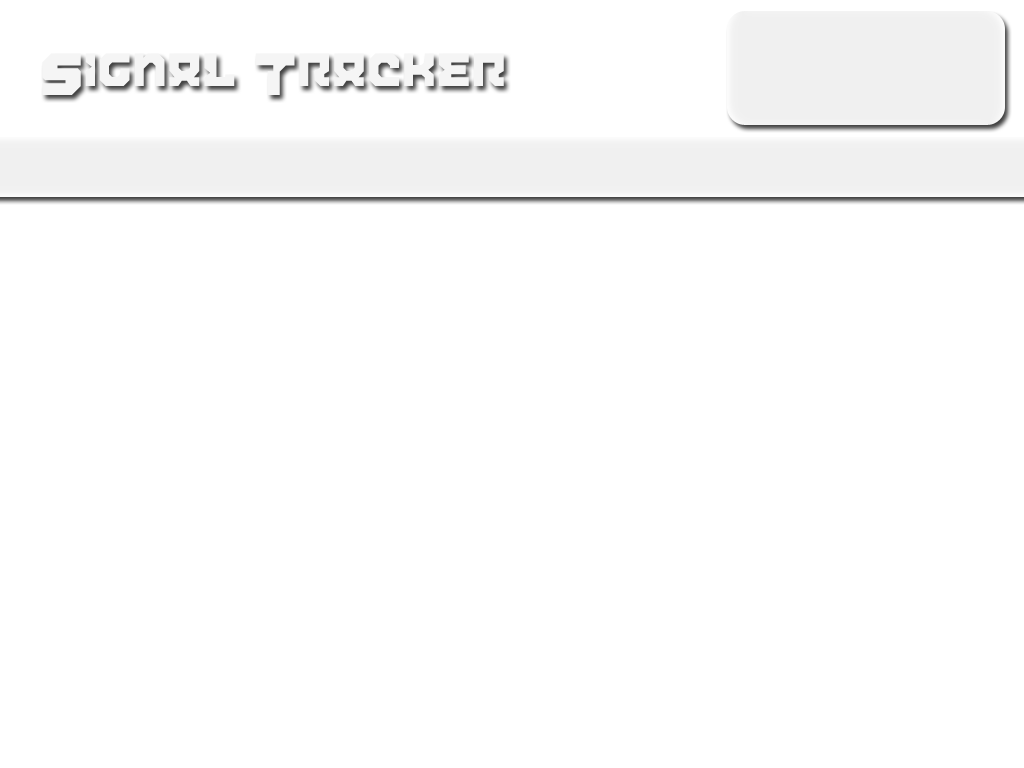
<style>
.page{position:relative;width:1024px;height:768px;background:#ffffff}
.page>*{position:absolute;margin:0}
.t1{font:60px "AiracobraAlt";color:#f5f5f5}
</style>
<div class="page">
<p class="t1" style="left:42px;top:53px;width:462px;height:42px">Signal Tracker</p>
</div>
